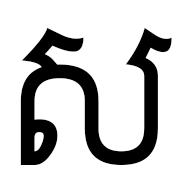
<style>
.page{position:relative;width:192px;height:192px;background:#ffffff}
.page>*{position:absolute;margin:0}
.t1{font:200.9px "ChantreaSRUI";color:#000000}
</style>
<div class="page">
<p class="t1" style="left:20px;top:27px;width:152px;height:138px">ស</p>
</div>
